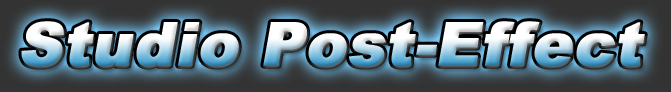
<style>
.page{position:relative;width:671px;height:92px}
.page>*{position:absolute;margin:0}
.t1{font:60px "Arial-Black";font-weight:bold;font-style:italic}
</style>
<div class="page">
<p class="t1" style="left:21px;top:21px;width:624px;height:46px">Studio Post-Effect</p>
</div>
